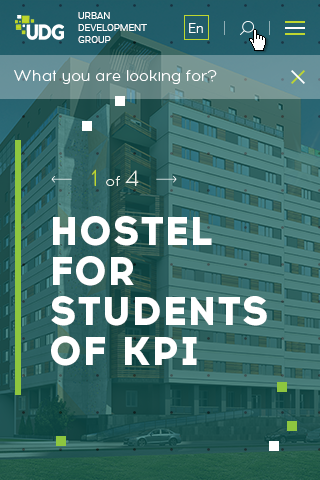
<style>
.page{position:relative;width:320px;height:480px}
.page>*{position:absolute;margin:0}
.t1{font:10px "Roboto-Light";color:#ffffff;text-transform:uppercase}
.t2{font:14px "Roboto-Light";color:#ffffff}
.t3{font:15px "Acrom-Light";color:#ffffff}
.t4{font:14px "Acrom-Light";color:#ecf0e8}
.t5{font:23px "Acrom-Light";color:#bed62f}
.t6{font:23px "Acrom-Light";color:#ecf0e8}
.t7{font:40px/40px "Acrom-ExtraBold";color:#ffffff;text-transform:uppercase}
</style>
<div class="page">
<p class="t1" style="left:78px;top:12px;width:69px;height:31px">urban<br>Development<br>Group</p>
<p class="t2" style="left:189px;top:23px;width:14px;height:10px">En</p>
<p class="t3" style="left:14px;top:70px;width:203px;height:14px">What you are looking for?</p>
<p class="t4" style="left:91px;top:169px;width:48px;height:17px"><span class="t5">1 </span>of <span class="t6">4</span></p>
<p class="t7" style="left:51px;top:216px;width:216px;height:150px">Hostel<br>for <br>students<br>of KPI</p>
</div>
